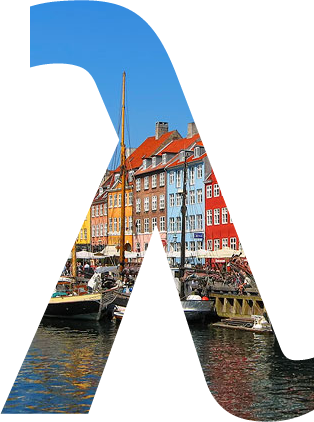
<style>
.page{position:relative;width:314px;height:422px;background:#ffffff}
.page>*{position:absolute;margin:0}
.t1{font:572.5px "HelveticaNeue-Bold"}
</style>
<div class="page">
<p class="t1" style="left:0px;top:0px;width:314px;height:422px">λ</p>
</div>
